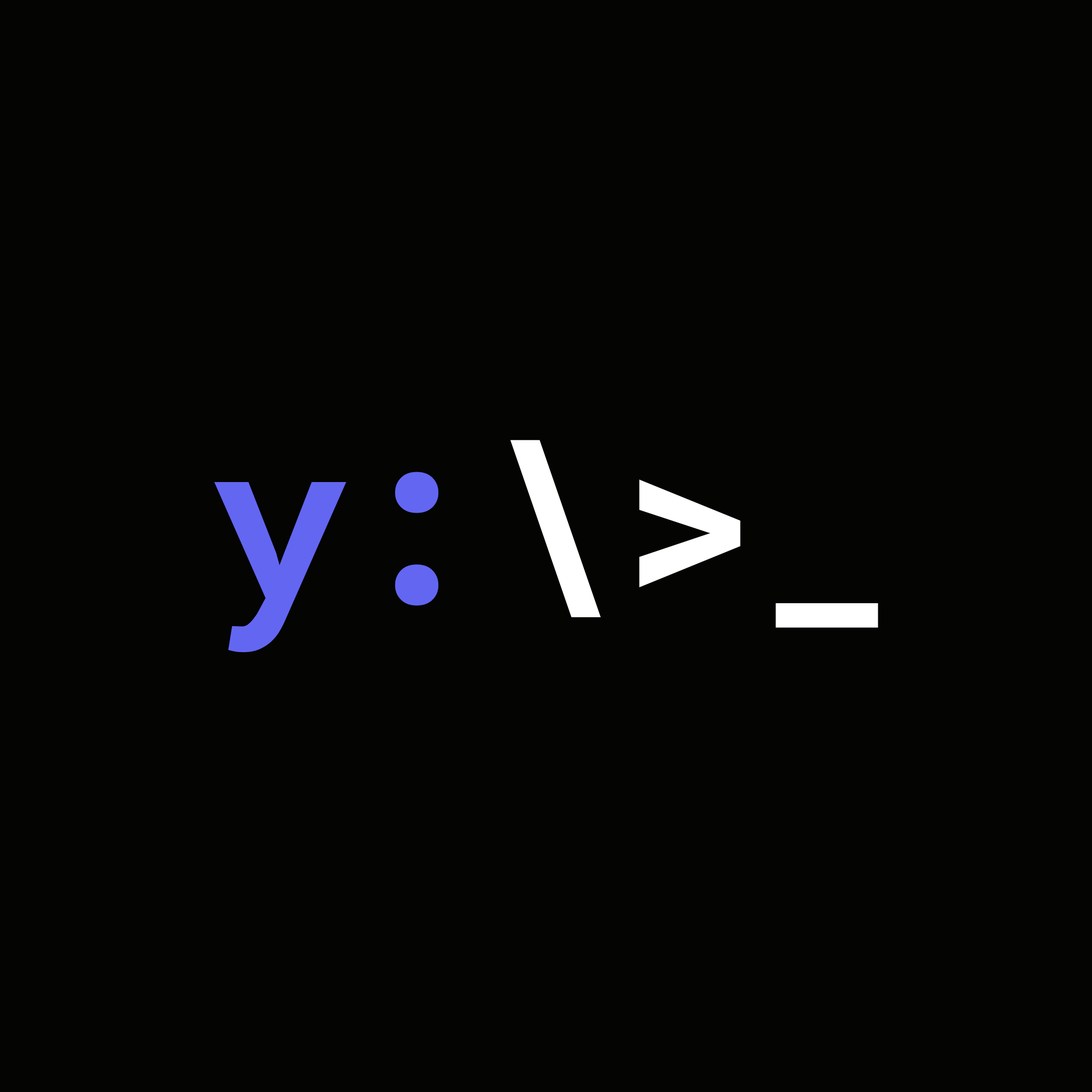
<style>
.page{position:relative;width:1092px;height:1092px;background:#040402}
.page>*{position:absolute;margin:0}
.t1{font:229.5px "RobotoMono-Bold";color:#ffffff}
.t2{font:229.5px "RobotoMono-Bold";color:#6366f1}
</style>
<div class="page">
<p class="t1" style="left:214px;top:440px;width:664px;height:213px"><span class="t2">y:</span>\&gt;_</p>
</div>
